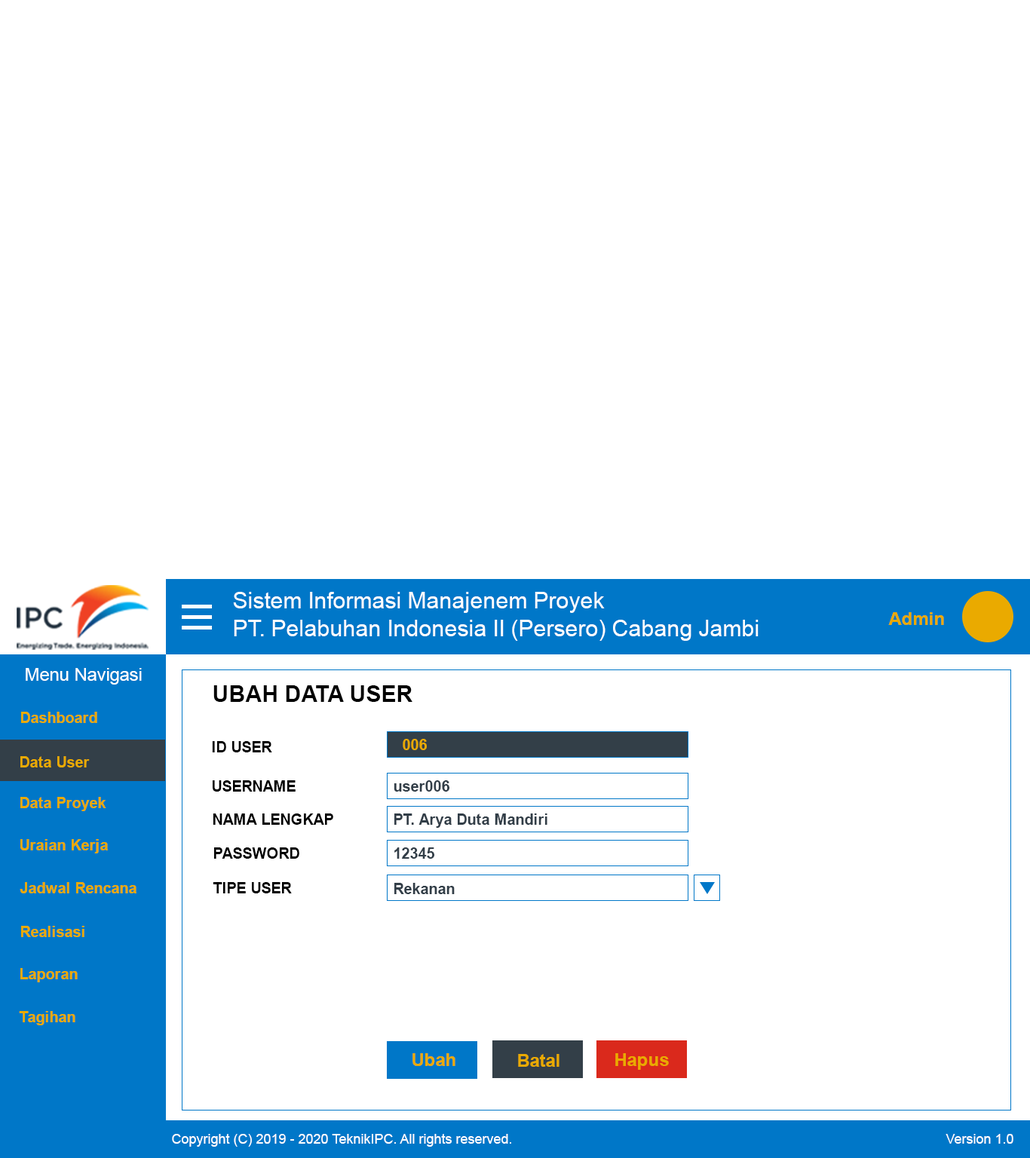
<style>
.page{position:relative;width:1030px;height:1158px;background:#ffffff}
.page>*{position:absolute;margin:0}
.t1{font:22.6px "ArialMT";color:#ffffff}
.t2{font:18.1px "Arial-BoldMT";color:#eaaa00}
.t3{font:18.1px "ArialMT";color:#ffffff}
.t4{font:22.6px "Arial-BoldMT";color:#000000}
.t5{font:15.1px "Arial-BoldMT";color:#eaaa00}
.t6{font:15.1px "Arial-BoldMT";color:#000000}
.t7{font:15.1px "Arial-BoldMT";color:#323e48}
.t8{font:13.6px "ArialMT";color:#ffffff}
</style>
<div class="page">
<p class="t1" style="left:233px;top:592px;width:372px;height:21px">Sistem Informasi Manajenem Proyek</p>
<p class="t2" style="left:888px;top:612px;width:56px;height:13px">Admin</p>
<p class="t1" style="left:234px;top:620px;width:524px;height:21px">PT. Pelabuhan Indonesia II (Persero) Cabang Jambi</p>
<p class="t3" style="left:26px;top:668px;width:116px;height:17px">Menu Navigasi</p>
<p class="t4" style="left:213px;top:685px;width:199px;height:17px">UBAH DATA USER</p>
<p class="t5" style="left:21px;top:712px;width:76px;height:11px">Dashboard</p>
<p class="t6" style="left:212px;top:741px;width:60px;height:11px">ID USER</p>
<p class="t5" style="left:403px;top:739px;width:24px;height:11px">006</p>
<p class="t5" style="left:20px;top:756px;width:70px;height:11px">Data User</p>
<p class="t6" style="left:213px;top:780px;width:83px;height:12px">USERNAME</p>
<p class="t7" style="left:394px;top:780px;width:55px;height:12px">user006</p>
<p class="t5" style="left:20px;top:797px;width:86px;height:14px">Data Proyek</p>
<p class="t6" style="left:213px;top:813px;width:120px;height:12px">NAMA LENGKAP</p>
<p class="t7" style="left:394px;top:813px;width:153px;height:15px">PT. Arya Duta Mandiri</p>
<p class="t5" style="left:20px;top:839px;width:88px;height:14px">Uraian Kerja</p>
<p class="t6" style="left:214px;top:847px;width:85px;height:12px">PASSWORD</p>
<p class="t7" style="left:394px;top:847px;width:40px;height:12px">12345</p>
<p class="t5" style="left:20px;top:882px;width:116px;height:11px">Jadwal Rencana</p>
<p class="t6" style="left:213px;top:882px;width:79px;height:11px">TIPE USER</p>
<p class="t7" style="left:394px;top:883px;width:61px;height:11px">Rekanan</p>
<p class="t5" style="left:21px;top:926px;width:63px;height:11px">Realisasi</p>
<p class="t5" style="left:20px;top:968px;width:58px;height:14px">Laporan</p>
<p class="t5" style="left:19px;top:1011px;width:56px;height:14px">Tagihan</p>
<p class="t2" style="left:412px;top:1053px;width:43px;height:13px">Ubah</p>
<p class="t2" style="left:518px;top:1054px;width:41px;height:13px">Batal</p>
<p class="t2" style="left:615px;top:1053px;width:54px;height:17px">Hapus</p>
<p class="t8" style="left:172px;top:1134px;width:339px;height:13px">Copyright (C) 2019 - 2020 TeknikIPC. All rights reserved.</p>
<p class="t8" style="left:945px;top:1134px;width:68px;height:10px">Version 1.0</p>
</div>
